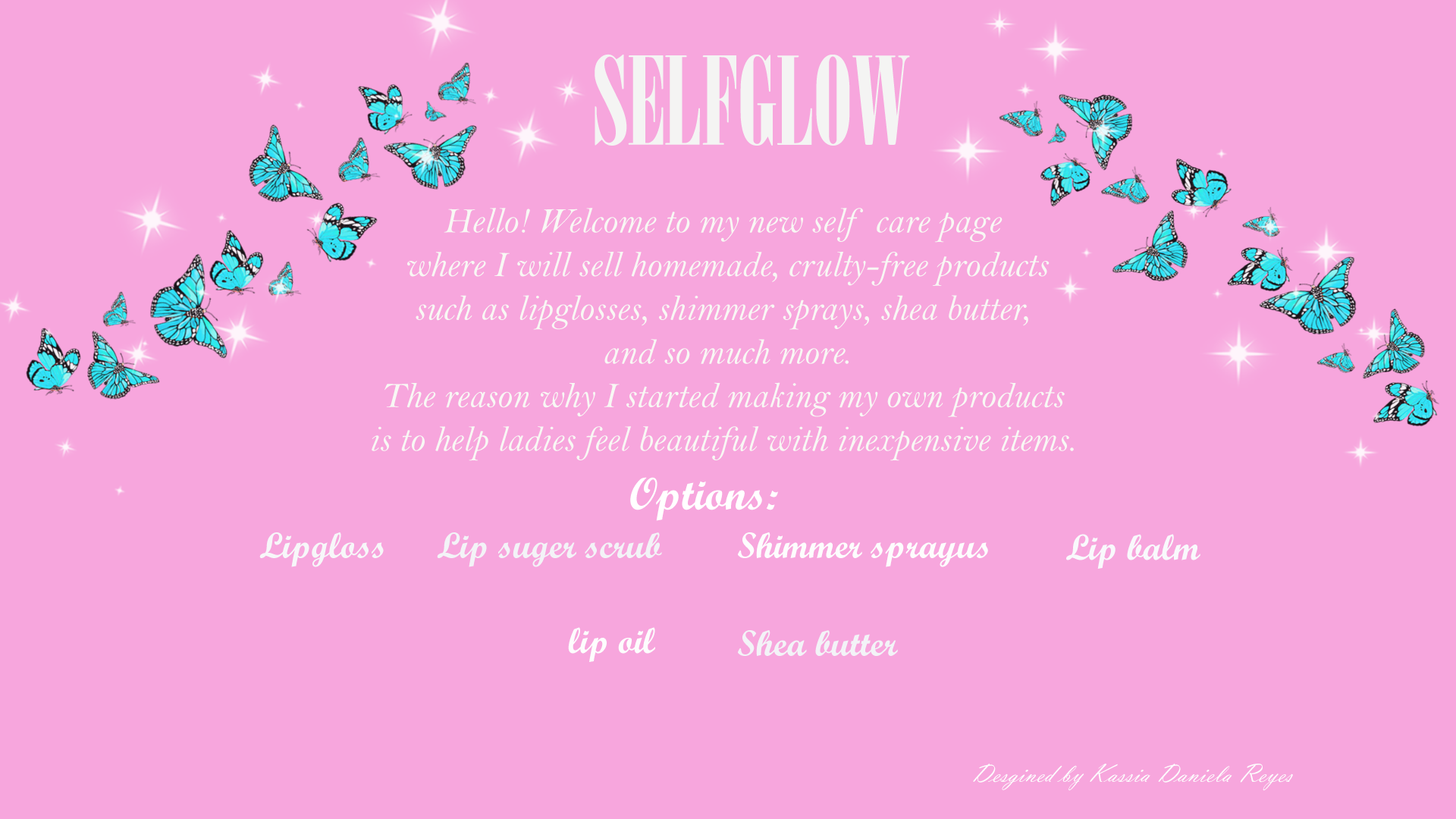
<style>
.page{position:relative;width:1456px;height:819px;background:#f7a6dd}
.page>*{position:absolute;margin:0}
.t1{font:121.3px "Onyx";color:#f4f4f3}
.t2{font:36.4px "BellMTItalic";color:#f8f8f4}
.t3{font:45.5px "ScriptMTBold";color:#ffffff}
.t4{font:36.4px "ScriptMTBold";color:#f7f7f9}
.t5{font:36.4px "ScriptMTBold";color:#f3f3f7}
.t6{font:36.4px "ScriptMTBold";color:#fdfdfd}
.t7{font:36.4px "ScriptMTBold";color:#f9f9fc}
.t8{font:27.3px "VladimirScript";color:#fdfdfd}
</style>
<div class="page">
<p class="t1" style="left:595px;top:54px;width:315px;height:92px">SELFGLOW</p>
<p class="t2" style="left:372px;top:208px;width:702px;height:253px;text-align:center">Hello! Welcome to my new self care page<br> where I will sell homemade, crulty-free products <br>such as lipglosses, shimmer sprays, shea butter,<br> and so much more. <br>The reason why I started making my own products <br>is to help ladies feel beautiful with inexpensive items.</p>
<p class="t3" style="left:630px;top:477px;width:148px;height:44px">Options:</p>
<p class="t4" style="left:259px;top:532px;width:125px;height:35px">Lipgloss</p>
<p class="t5" style="left:437px;top:532px;width:225px;height:35px">Lip suger scrub</p>
<p class="t6" style="left:738px;top:532px;width:250px;height:35px">Shimmer sprayus</p>
<p class="t7" style="left:1066px;top:534px;width:134px;height:35px">Lip balm</p>
<p class="t6" style="left:568px;top:627px;width:87px;height:35px">lip oil</p>
<p class="t5" style="left:738px;top:630px;width:160px;height:26px">Shea butter</p>
<p class="t8" style="left:973px;top:764px;width:320px;height:27px">Desgined by Kassia Daniela Reyes</p>
</div>
